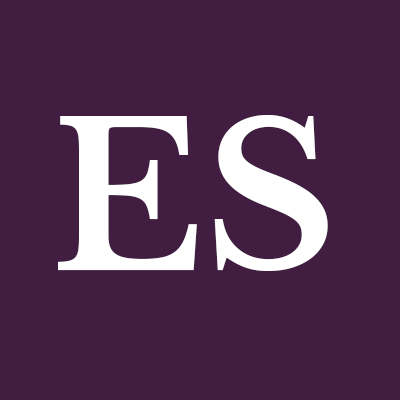
<style>
.page{position:relative;width:400px;height:400px;background:#411e41}
.page>*{position:absolute;margin:0}
.t1{font:200px "LibreBaskerville-Bold";color:#ffffff}
</style>
<div class="page">
<p class="t1" style="left:58px;top:115px;width:270px;height:156px">ES</p>
</div>
